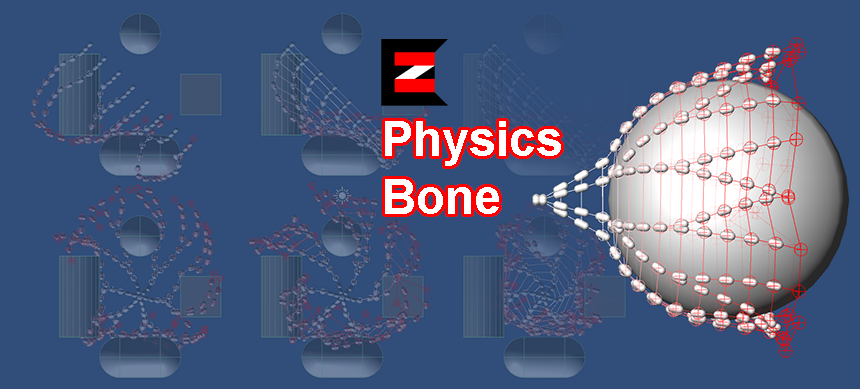
<style>
.page{position:relative;width:860px;height:389px;background:#314d79}
.page>*{position:absolute;margin:0}
.t1{font:48px "Arial-BoldMT";color:#ffffff}
</style>
<div class="page">
<p class="t1" style="left:385px;top:121px;width:176px;height:93px">Physics<br>Bone</p>
</div>
